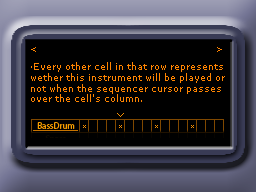
<style>
.page{position:relative;width:256px;height:192px;background:#000000}
.page>*{position:absolute;margin:0}
.t1{font:9px "MSReferenceSansSerif";color:#ff8400}
</style>
<div class="page">
<p class="t1" style="left:31px;top:47px;width:5px;height:5px">&lt;</p>
<p class="t1" style="left:217px;top:47px;width:5px;height:5px">&gt;</p>
<p class="t1" style="left:31px;top:62px;width:194px;height:40px">·Every other cell in that row represents <br>wether this instrument will be played or <br>not when the sequencer cursor passes <br>over the cell's column.</p>
</div>
